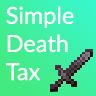
<style>
.page{position:relative;width:96px;height:96px}
.page>*{position:absolute;margin:0}
.t1{font:23.4px "Lato-Regular";color:#ffffff}
</style>
<div class="page">
<p class="t1" style="left:6px;top:6px;width:68px;height:75px">Simple <br>Death<br>Tax</p>
</div>
